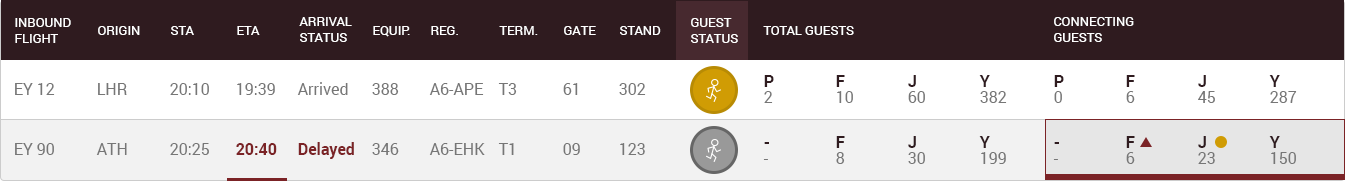
<style>
.page{position:relative;width:1345px;height:181px;background:#ffffff}
.page>*{position:absolute;margin:0}
.t1{font:13px "Roboto-Regular";color:#ffffff;text-transform:uppercase}
.t2{font:16px/16px "Roboto-Regular";color:#767676}
.t3{font:16px/16px "Roboto-Bold";color:#2f1b1f}
.t4{font:16px "Roboto-Regular";color:#767676}
.t5{font:16px "Roboto-Bold";color:#7b2326}
</style>
<div class="page">
<p class="t1" style="left:299px;top:17px;width:53px;height:25px">Arrival<br>Status</p>
<p class="t1" style="left:1054px;top:17px;width:80px;height:25px">Connecting<br>Guests</p>
<p class="t1" style="left:15px;top:18px;width:56px;height:25px">Inbound<br>Flight</p>
<p class="t1" style="left:98px;top:26px;width:42px;height:9px">Origin</p>
<p class="t1" style="left:171px;top:26px;width:23px;height:9px">STA</p>
<p class="t1" style="left:237px;top:26px;width:23px;height:9px">ETA</p>
<p class="t1" style="left:373px;top:26px;width:37px;height:11px">EQuip.</p>
<p class="t1" style="left:431px;top:26px;width:27px;height:9px">Reg.</p>
<p class="t1" style="left:499px;top:26px;width:39px;height:9px">Term.</p>
<p class="t1" style="left:564px;top:26px;width:32px;height:9px">Gate</p>
<p class="t1" style="left:620px;top:26px;width:41px;height:9px">Stand</p>
<p class="t1" style="left:691px;top:18px;width:47px;height:25px">Guest<br>Status</p>
<p class="t1" style="left:763px;top:26px;width:91px;height:9px">Total Guests</p>
<p class="t2" style="left:764px;top:75px;width:243px;height:28px"><span class="t3">P  F  J  Y<br></span>2  10  60  382</p>
<p class="t2" style="left:1054px;top:75px;width:243px;height:28px"><span class="t3">P  F  J  Y<br></span>0  6  45  287</p>
<p class="t4" style="left:15px;top:83px;width:40px;height:12px">EY 12</p>
<p class="t4" style="left:98px;top:83px;width:29px;height:12px">LHR</p>
<p class="t4" style="left:170px;top:83px;width:39px;height:12px">20:10</p>
<p class="t4" style="left:237px;top:83px;width:38px;height:12px">19:39</p>
<p class="t4" style="left:297px;top:82px;width:51px;height:13px">Arrived</p>
<p class="t4" style="left:372px;top:83px;width:27px;height:12px">388</p>
<p class="t4" style="left:429px;top:83px;width:55px;height:12px">A6-APE</p>
<p class="t4" style="left:498px;top:83px;width:19px;height:12px">T3</p>
<p class="t4" style="left:563px;top:83px;width:15px;height:12px">61</p>
<p class="t4" style="left:619px;top:83px;width:27px;height:12px">302</p>
<p class="t2" style="left:763px;top:136px;width:243px;height:28px"><span class="t3">-  F  J  Y<br></span>-  8  30  199</p>
<p class="t2" style="left:1053px;top:136px;width:243px;height:28px"><span class="t3">-  F  J  Y<br></span>-  6  23  150</p>
<p class="t4" style="left:15px;top:143px;width:39px;height:12px">EY 90</p>
<p class="t4" style="left:96px;top:143px;width:31px;height:12px">ATH</p>
<p class="t4" style="left:170px;top:143px;width:39px;height:12px">20:25</p>
<p class="t5" style="left:236px;top:143px;width:41px;height:12px">20:40</p>
<p class="t5" style="left:298px;top:142px;width:56px;height:17px">Delayed</p>
<p class="t4" style="left:372px;top:143px;width:27px;height:12px">346</p>
<p class="t4" style="left:429px;top:143px;width:56px;height:12px">A6-EHK</p>
<p class="t4" style="left:498px;top:143px;width:16px;height:12px">T1</p>
<p class="t4" style="left:563px;top:143px;width:17px;height:12px">09</p>
<p class="t4" style="left:620px;top:143px;width:25px;height:12px">123</p>
</div>
